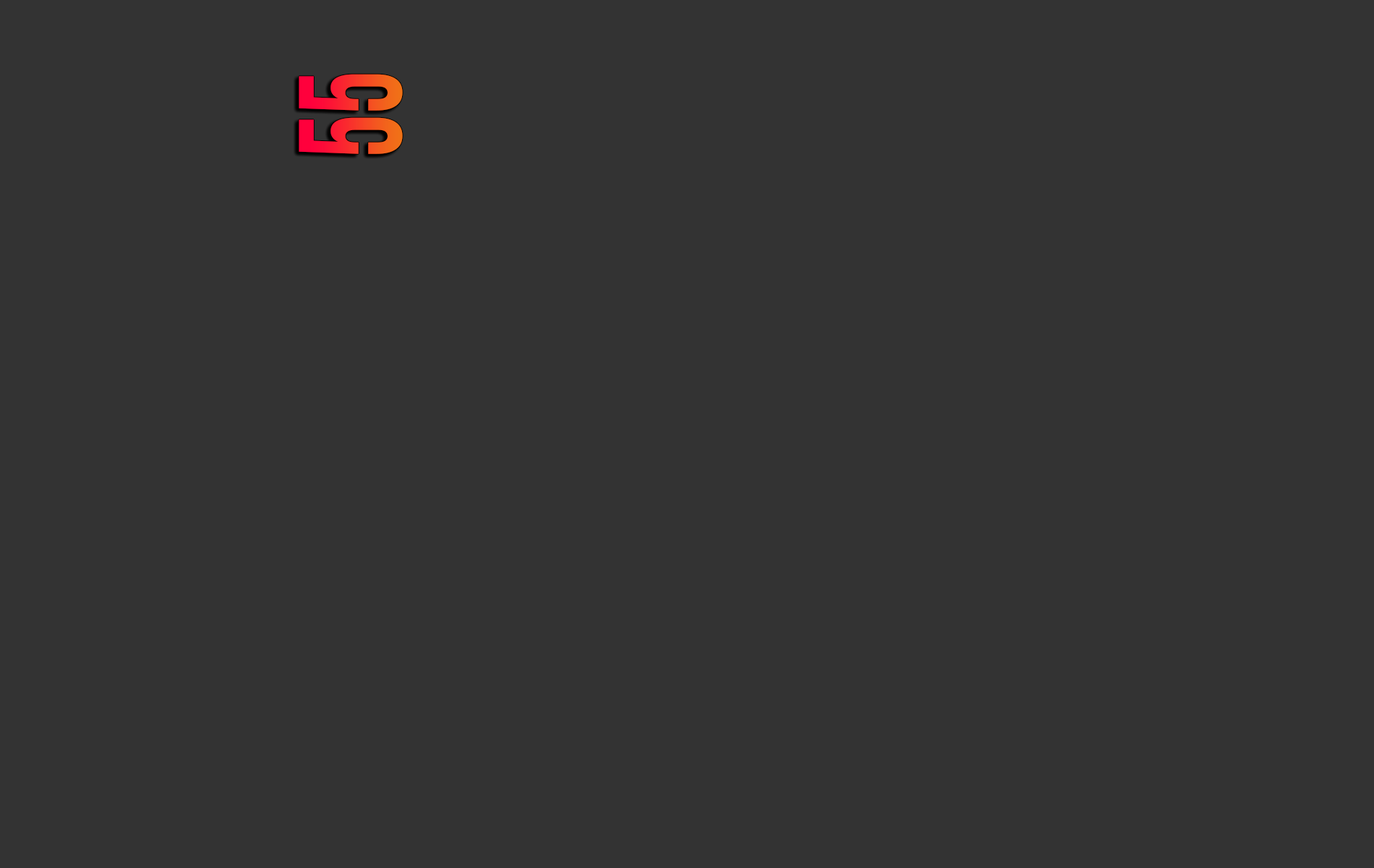
<style>
.page{position:relative;width:1374px;height:868px;background:#333333}
.page>*{position:absolute;margin:0}
.t1{font:146.1px "BebasNeue-Regular";scale:0.75 1}
</style>
<div class="page">
<p class="t1" style="left:299px;top:74px;width:104px;height:80px;rotate:-90deg">55</p>
</div>
